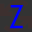
<style>
.page{position:relative;width:32px;height:32px;background:#333333}
.page>*{position:absolute;margin:0}
.t1{font:32px "STHeiti";color:#0000ff}
</style>
<div class="page">
<p class="t1" style="left:9px;top:5px;width:15px;height:24px">Z</p>
</div>
